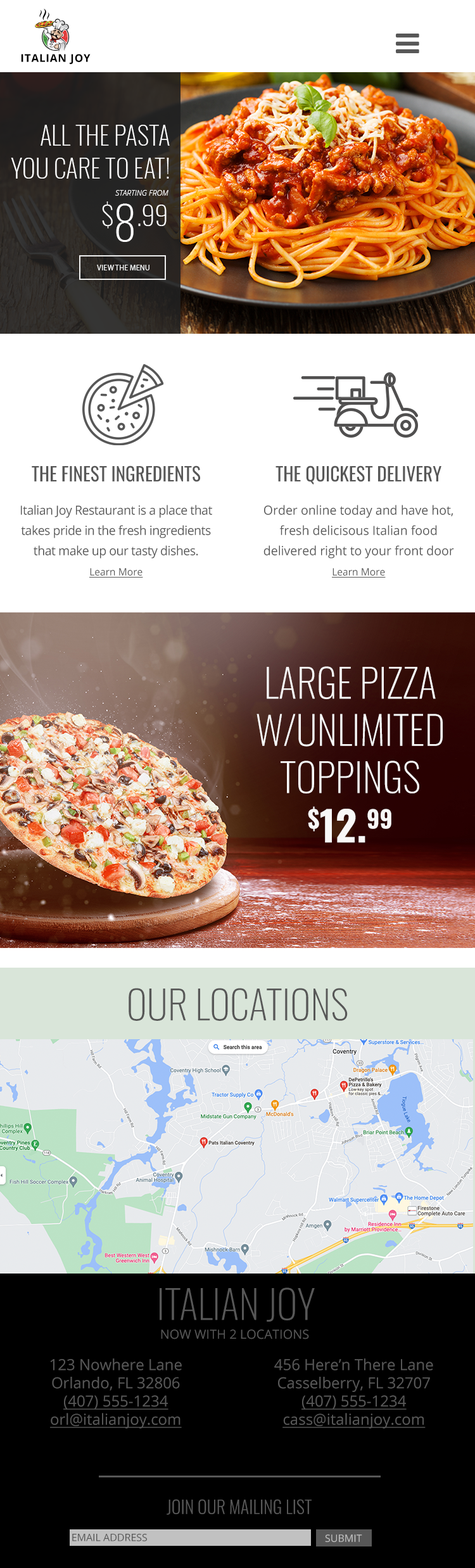
<style>
.page{position:relative;width:475px;height:1568px}
.page>*{position:absolute;margin:0}
.t1{font:10.8px "OpenSans-Bold";letter-spacing:0.048em;color:#000000;text-transform:uppercase}
.t2{font:25.3px/32.9px "Oswald-ExtraLight";color:#ffffff;text-transform:uppercase}
.t3{font:7.6px/37.4px "OpenSans-LightItalic";color:#fefefe;text-transform:uppercase}
.t4{font:27.2px/37.4px "Oswald-Bold";color:#fefefe;text-transform:uppercase}
.t5{font:46.2px/45.6px "Oswald-ExtraLight";color:#fefefe;text-transform:uppercase}
.t6{font:7.6px "MyriadPro-Regular";color:#ededed;text-transform:uppercase}
.t7{font:12.7px/20.3px "OpenSans-Regular";letter-spacing:-0.025em;color:#575757}
.t8{font:19px "Oswald-Regular";color:#575757;text-transform:uppercase}
.t9{font:10.8px "OpenSans-Regular";color:#575757}
.t10{font:10.1px/20.3px "OpenSans-Regular";color:#575757;text-decoration:underline}
.t11{font:12.7px/20.3px "OpenSans-Regular";color:#575757}
.t12{font:39.3px "Oswald-ExtraLight";color:#f8f8f8;text-transform:uppercase}
.t13{font:41.2px "Oswald-Bold";color:#f8f8f8;text-transform:uppercase}
.t14{font:41.2px "Oswald-Bold";color:#f8f8f8}
.t15{font:39.3px "Oswald-ExtraLight";color:#575757;text-transform:uppercase}
.t16{font:12.7px "OpenSans-Regular";color:#575757;text-transform:uppercase}
.t17{font:15.2px "OpenSans-Regular";color:#575757}
.t18{font:15.2px "OpenSans-Regular";color:#575757;text-decoration:underline}
.t19{font:17.7px "Oswald-Light";color:#575757;text-transform:uppercase}
.t20{font:10.1px "OpenSans-Regular";color:#575757;text-transform:uppercase}
.t21{font:10.1px "OpenSans-Regular";color:#c2c2c2;text-transform:uppercase}
</style>
<div class="page">
<p class="t1" style="left:21px;top:54px;width:70px;height:11px">italian Joy</p>
<p class="t2" style="left:11px;top:125px;width:159px;height:54px;text-align:right">All the Pasta<br>You Care To Eat!</p>
<p class="t3" style="left:102px;top:190px;width:66px;height:52px;text-align:right">starting from<span class="t4"><br></span><span class="t5">$8.99</span></p>
<p class="t6" style="left:97px;top:265px;width:52px;height:5px">view the menu</p>
<p class="t7" style="left:21px;top:465px;width:191px;height:113px;text-align:center"><span class="t8">The finest ingredients<br></span><span class="t9"><br></span>Italian Joy Restaurant is a place that takes pride in the fresh ingredients that make up our tasty dishes. <br><span class="t10">Learn More</span></p>
<p class="t11" style="left:263px;top:465px;width:191px;height:113px;text-align:center"><span class="t8">The quickest delivery<br></span><span class="t9"><br></span>Order online today and have hot, fresh delicisous Italian food delivered right to your front door<br><span class="t10">Learn More</span></p>
<p class="t12" style="left:256px;top:666px;width:187px;height:177px;text-align:center">Large pizza<br>w/unlimited<br>toppings<br><span class="t13">$12.</span><span class="t14">99</span></p>
<p class="t15" style="left:129px;top:988px;width:219px;height:33px">Our Locations</p>
<p class="t15" style="left:160px;top:1287px;width:155px;height:35px">italian joy</p>
<p class="t16" style="left:161px;top:1329px;width:148px;height:10px">Now with 2 locations</p>
<p class="t17" style="left:50px;top:1358px;width:132px;height:71px;text-align:center">123 Nowhere Lane<br>Orlando, FL 32806<br><span class="t18">(407) 555-1234<br>orl@italianjoy.com</span></p>
<p class="t17" style="left:274px;top:1358px;width:159px;height:71px;text-align:center">456 Here’n There Lane<br>Casselberry, FL 32707<br><span class="t18">(407) 555-1234<br>cass@italianjoy.com</span></p>
<p class="t19" style="left:167px;top:1499px;width:145px;height:16px">Join Our Mailing List</p>
<p class="t20" style="left:72px;top:1534px;width:75px;height:7px">Email Address</p>
<p class="t21" style="left:325px;top:1534px;width:37px;height:8px">submit</p>
</div>
